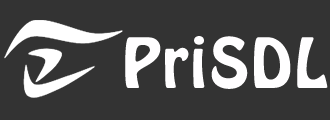
<style>
.page{position:relative;width:330px;height:120px;background:#333333}
.page>*{position:absolute;margin:0}
.t1{font:60px "HoboStd";letter-spacing:0.02em;color:#fffeff;font-weight:bold}
</style>
<div class="page">
<p class="t1" style="left:125px;top:36px;width:203px;height:53px">PriSDL</p>
</div>
